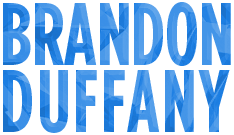
<style>
.page{position:relative;width:234px;height:135px;background:#ffffff}
.page>*{position:absolute;margin:0}
.t1{font:89.1px/67px "GothamHTF-BoldCondensed";scale:0.91 1}
.t2{font:89.1px/67px "GothamHTF-BoldCondensed";letter-spacing:0.034em;scale:0.91 1}
</style>
<div class="page">
<p class="t1" style="left:3px;top:2px;width:228px;height:131px;text-align:center">BRANDON<br><span class="t2">DUFFANY</span></p>
</div>
